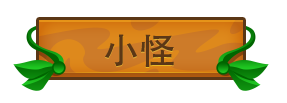
<style>
.page{position:relative;width:287px;height:103px;background:#ffffff}
.page>*{position:absolute;margin:0}
.t1{font:36px "AdobeHeitiStd-Regular";letter-spacing:0.025em;color:#5b3716}
</style>
<div class="page">
<p class="t1" style="left:105px;top:34px;width:69px;height:33px">小怪</p>
</div>
